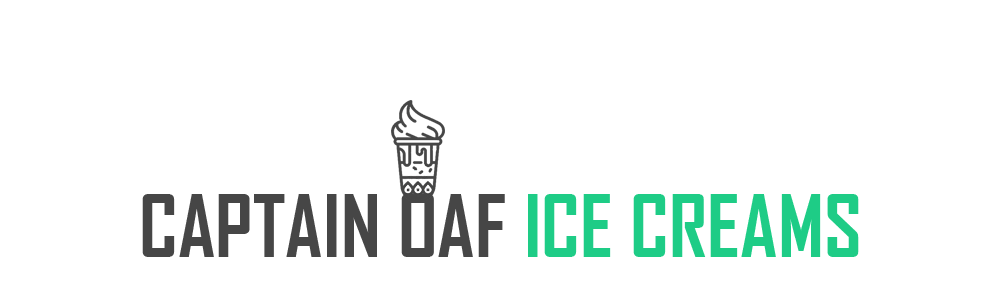
<style>
.page{position:relative;width:1000px;height:300px;background:#ffffff}
.page>*{position:absolute;margin:0}
.t1{font:83.3px "AgencyFB-Bold";color:#464646}
.t2{font:83.3px "AgencyFB-Bold";color:#1ecc86}
</style>
<div class="page">
<p class="t1" style="left:142px;top:194px;width:717px;height:63px">CAPTAIN OAF <span class="t2">ICE CREAMS</span></p>
</div>
